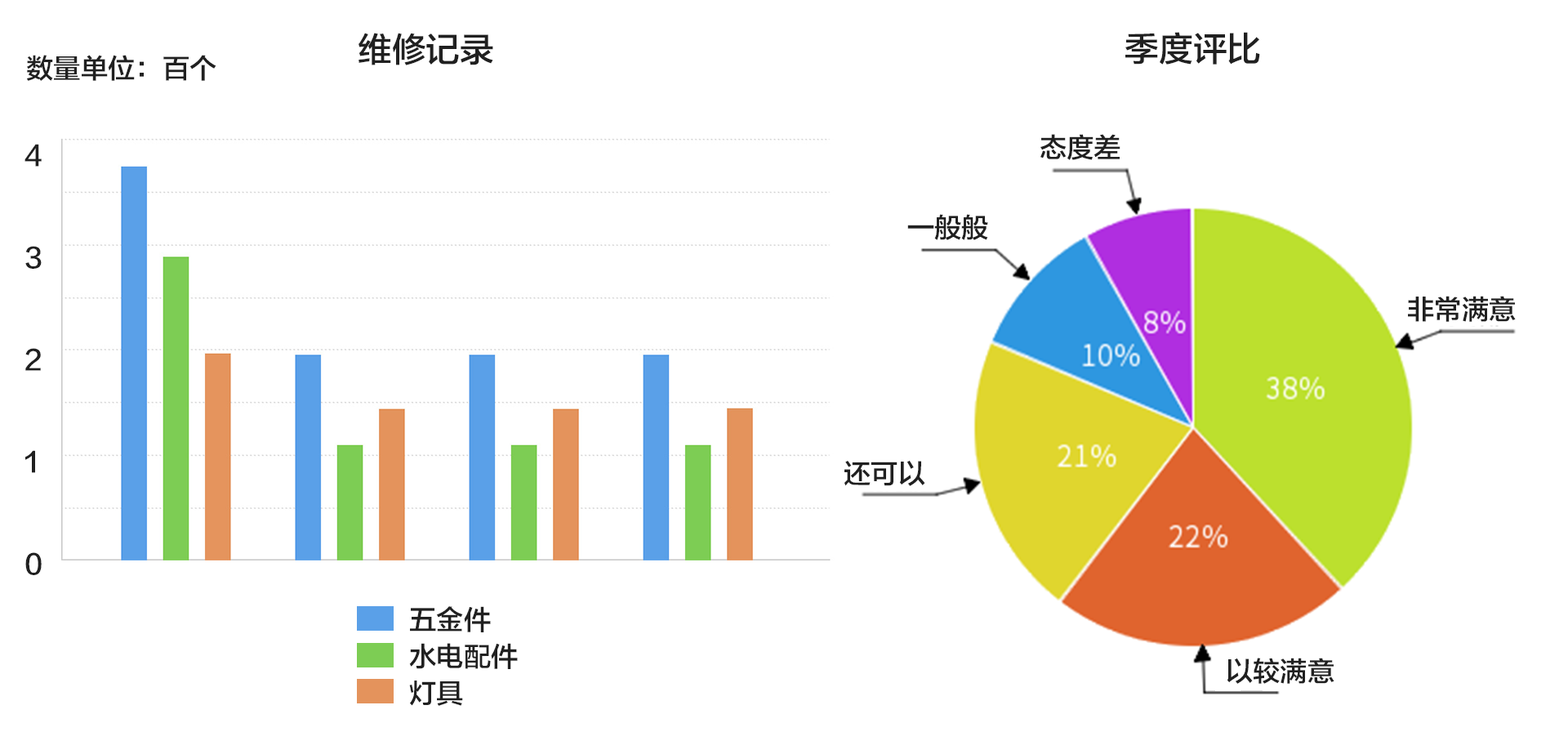
<style>
.page{position:relative;width:1568px;height:732px;background:#ffffff}
.page>*{position:absolute;margin:0}
.t1{font:34px "FZLTZHK--GBK1-0";color:#202020}
.t2{font:27.2px "FZLTZHK--GBK1-0";color:#202020}
.t3{font:27.2px/102.1px "FZLTZHK--GBK1-0";color:#202020}
</style>
<div class="page">
<p class="t1" style="left:359px;top:33px;width:134px;height:32px">维修记录</p>
<p class="t1" style="left:1125px;top:32px;width:135px;height:33px">季度评比</p>
<p class="t2" style="left:27px;top:55px;width:189px;height:26px">数量单位：百个</p>
<p class="t2" style="left:1040px;top:134px;width:80px;height:26px">态度差</p>
<p class="t3" style="left:24px;top:144px;width:18px;height:431px">4<br>3<br>2<br>1<br>0</p>
<p class="t2" style="left:907px;top:214px;width:81px;height:26px">一般般</p>
<p class="t2" style="left:1408px;top:296px;width:108px;height:26px">非常满意</p>
<p class="t2" style="left:844px;top:461px;width:81px;height:25px">还可以</p>
<p class="t2" style="left:410px;top:606px;width:81px;height:26px">五金件</p>
<p class="t2" style="left:409px;top:643px;width:109px;height:26px">水电配件</p>
<p class="t2" style="left:1227px;top:657px;width:107px;height:27px">以较满意</p>
<p class="t2" style="left:409px;top:680px;width:54px;height:26px">灯具</p>
</div>
